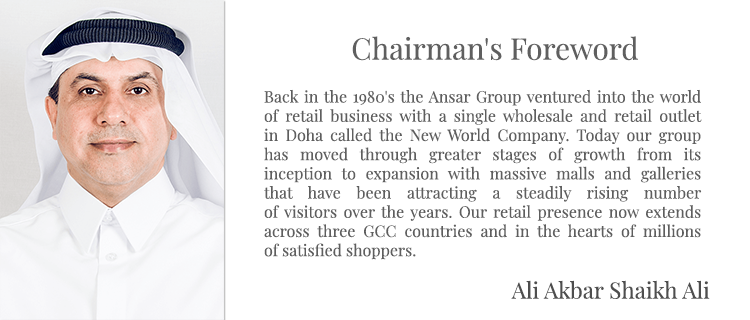
<style>
.page{position:relative;width:750px;height:320px;background:#ffffff}
.page>*{position:absolute;margin:0}
.t1{font:29.6px "PlayfairDisplay-Regular";color:#5f5f5f}
.t2{font:16px "PlayfairDisplay-Regular";color:#5e5e5e}
.t3{font:22.6px "PlayfairDisplay-Regular";color:#4e4e4e}
</style>
<div class="page">
<p class="t1" style="left:352px;top:36px;width:286px;height:25px">Chairman's Foreword</p>
<p class="t2" style="left:264px;top:89px;width:438px;height:171px;text-align:justify">Back in the 1980's the Ansar Group ventured into the world<br>of retail business with a single wholesale and retail outlet<br>in Doha called the New World Company. Today our group <br>has moved through greater stages of growth from its<br>inception to expansion with massive malls and galleries <br>that have been attracting a steadily rising number <br>of visitors over the years. Our retail presence now extends <br>across three GCC countries and in the hearts of millions<br>of satisfied shoppers.</p>
<p class="t3" style="left:511px;top:280px;width:199px;height:19px">Ali Akbar Shaikh Ali</p>
</div>
